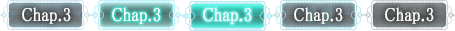
<style>
.page{position:relative;width:455px;height:31px}
.page>*{position:absolute;margin:0}
.t1{font:19px "MS-PMincho";color:#ffffff;font-weight:bold;scale:0.84 1}
</style>
<div class="page">
<p class="t1" style="left:22px;top:7px;width:49px;height:17px">Chap.3</p>
<p class="t1" style="left:112px;top:7px;width:49px;height:17px">Chap.3</p>
<p class="t1" style="left:203px;top:7px;width:49px;height:17px">Chap.3</p>
<p class="t1" style="left:294px;top:7px;width:49px;height:17px">Chap.3</p>
<p class="t1" style="left:385px;top:7px;width:49px;height:17px">Chap.3</p>
</div>
